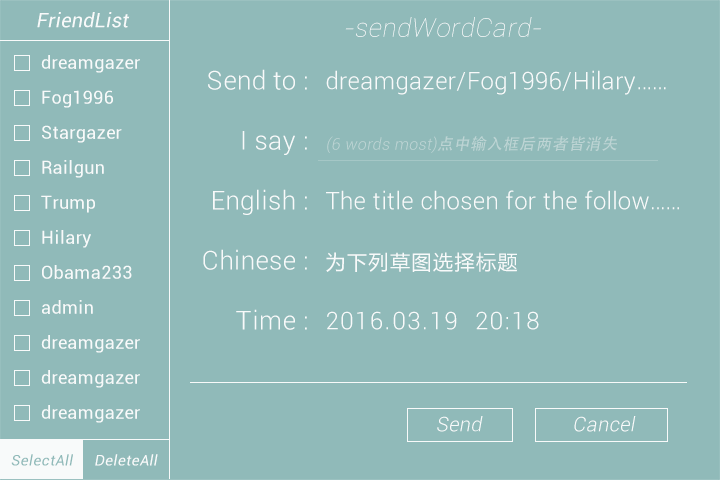
<style>
.page{position:relative;width:720px;height:480px;background:#90bab9}
.page>*{position:absolute;margin:0}
.t1{font:20px "Roboto-Regular";letter-spacing:0.025em;color:#f8fafa;font-style:italic}
.t2{font:26px "Roboto-Thin";letter-spacing:0.025em;color:#f8fafa;font-style:italic}
.t3{font:18px "Roboto-Regular";letter-spacing:0.025em;color:#f8fafa}
.t4{font:26px/60px "Roboto-Light";letter-spacing:0.025em;color:#f8fafa}
.t5{font:24px/60px "Roboto-Light";letter-spacing:0.025em;color:#f8fafa}
.t6{font:20px/60px "MicrosoftYaHei";letter-spacing:0.075em;color:#f8fafa}
.t7{font:24px/60px "Roboto-Light";letter-spacing:0.075em;color:#f8fafa}
.t8{font:16px "Roboto-Light";letter-spacing:0.025em;color:#bdd4d4;font-style:italic}
.t9{font:16px "AdobeHeitiStd-Regular";letter-spacing:0.025em;color:#bdd4d4;font-style:italic}
.t10{font:20px "Roboto-Light";letter-spacing:0.025em;color:#f8fafa;font-style:italic}
.t11{font:15px "Roboto-Regular";letter-spacing:0.025em;color:#90bab9;font-style:italic}
.t12{font:15px "Roboto-Regular";letter-spacing:0.025em;color:#f8fafa;font-style:italic}
</style>
<div class="page">
<p class="t1" style="left:37px;top:12px;width:93px;height:16px">FriendList</p>
<p class="t2" style="left:345px;top:17px;width:196px;height:20px">-sendWordCard-</p>
<p class="t3" style="left:41px;top:55px;width:99px;height:18px">dreamgazer</p>
<p class="t4" style="left:203px;top:69px;width:104px;height:261px;text-align:right">Send to : <br>I say : <br>English : <br>Chinese : <br>Time :</p>
<p class="t5" style="left:326px;top:70px;width:353px;height:260px">dreamgazer/Fog1996/Hilary……<br><br>The title chosen for the follow……<br><span class="t6">为下列草图选择标题<br></span><span class="t7">2016.03.19  20:18</span></p>
<p class="t3" style="left:42px;top:90px;width:71px;height:18px">Fog1996</p>
<p class="t3" style="left:42px;top:125px;width:80px;height:18px">Stargazer</p>
<p class="t8" style="left:327px;top:136px;width:290px;height:17px">(6 words most)<span class="t9">点中输入框后两者皆消失</span></p>
<p class="t3" style="left:42px;top:160px;width:62px;height:18px">Railgun</p>
<p class="t3" style="left:41px;top:195px;width:54px;height:18px">Trump</p>
<p class="t3" style="left:42px;top:230px;width:49px;height:18px">Hilary</p>
<p class="t3" style="left:42px;top:265px;width:90px;height:14px">Obama233</p>
<p class="t3" style="left:42px;top:300px;width:51px;height:14px">admin</p>
<p class="t3" style="left:41px;top:335px;width:99px;height:18px">dreamgazer</p>
<p class="t3" style="left:41px;top:370px;width:99px;height:18px">dreamgazer</p>
<p class="t3" style="left:41px;top:405px;width:99px;height:18px">dreamgazer</p>
<p class="t10" style="left:437px;top:416px;width:46px;height:16px">Send</p>
<p class="t10" style="left:574px;top:416px;width:62px;height:16px">Cancel</p>
<p class="t11" style="left:11px;top:454px;width:62px;height:12px">SelectAll</p>
<p class="t12" style="left:95px;top:454px;width:63px;height:12px">DeleteAll</p>
</div>
